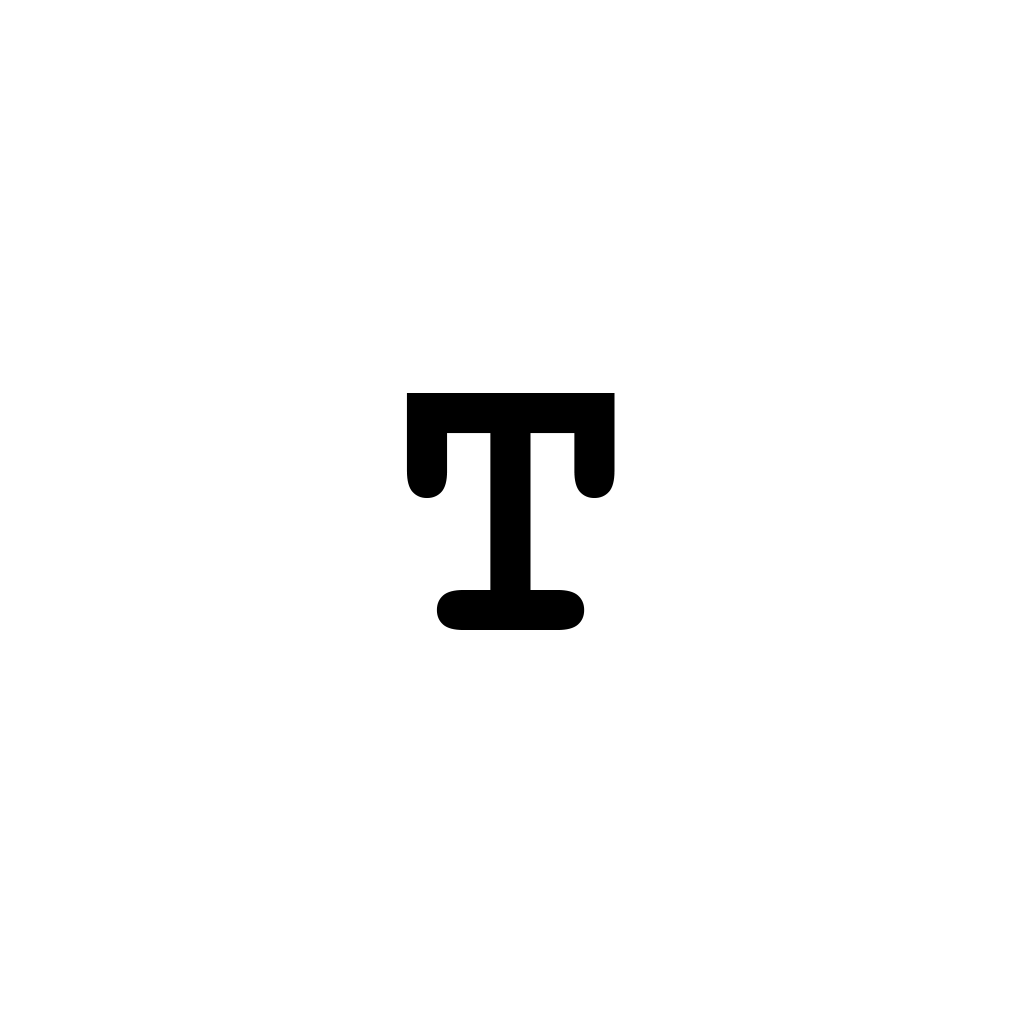
<style>
.page{position:relative;width:1024px;height:1024px;background:#ffffff}
.page>*{position:absolute;margin:0}
.t1{font:400px "CourierNewPS-BoldMT";color:#000000}
</style>
<div class="page">
<p class="t1" style="left:406px;top:393px;width:209px;height:237px">T</p>
</div>
